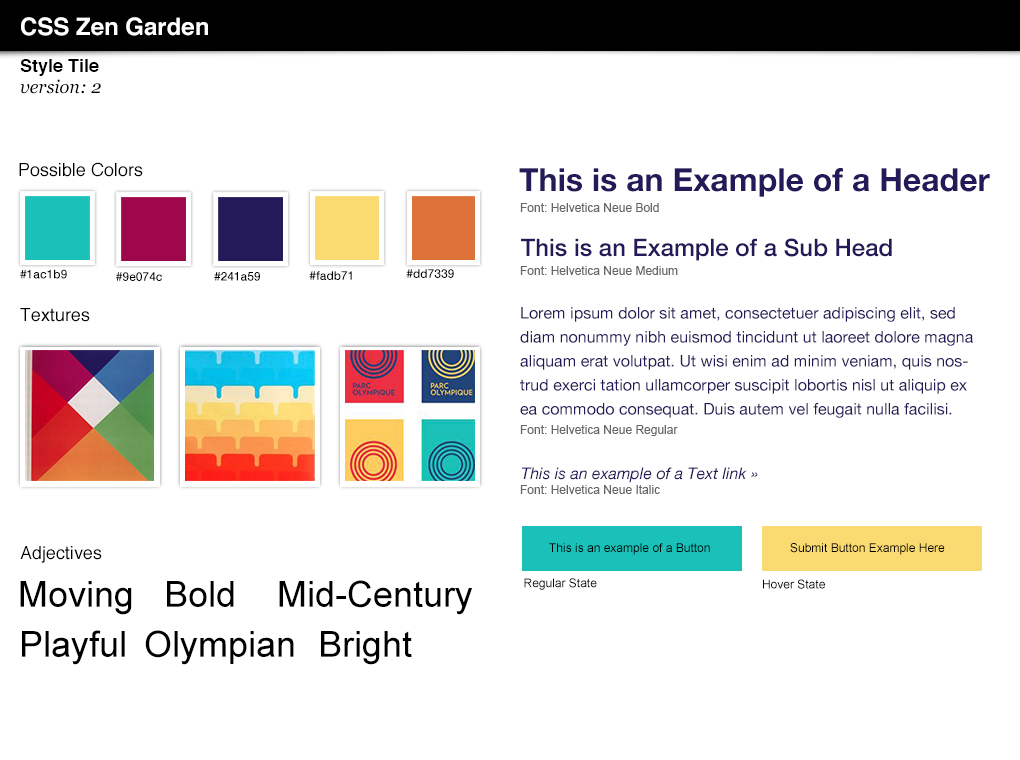
<style>
.page{position:relative;width:1020px;height:760px;background:#ffffff}
.page>*{position:absolute;margin:0}
.t1{font:24px "Helvetica-Bold";color:#ffffff}
.t2{font:18px "Helvetica-Bold";color:#000000}
.t3{font:18px "Georgia-Italic";color:#000000}
.t4{font:18px "Helvetica";color:#000000}
.t5{font:32px "HelveticaNeue-Bold";color:#241a59}
.t6{font:12px "ArialMT";color:#666666}
.t7{font:24px "HelveticaNeue-Medium";color:#241a59}
.t8{font:12px "HelveticaNeue-Medium";color:#000000}
.t9{font:16px/24px "HelveticaNeue";color:#241a59}
.t10{font:16px "HelveticaNeue-Italic";color:#241a59}
.t11{font:12px "ArialMT";color:#000000}
.t12{font:36px "ArialMT";color:#000000}
</style>
<div class="page">
<p class="t1" style="left:21px;top:17px;width:187px;height:19px">CSS Zen Garden</p>
<p class="t2" style="left:20px;top:59px;width:79px;height:17px">Style Tile</p>
<p class="t3" style="left:20px;top:79px;width:81px;height:15px">version: 2</p>
<p class="t4" style="left:19px;top:162px;width:124px;height:15px">Possible Colors</p>
<p class="t5" style="left:519px;top:168px;width:471px;height:29px">This is an Example of a Header</p>
<p class="t6" style="left:520px;top:203px;width:139px;height:9px">Font: Helvetica Neue Bold</p>
<p class="t7" style="left:521px;top:238px;width:371px;height:23px">This is an Example of a Sub Head</p>
<p class="t8" style="left:20px;top:269px;width:47px;height:10px">#1ac1b9</p>
<p class="t8" style="left:406px;top:269px;width:48px;height:9px">#dd7339</p>
<p class="t6" style="left:520px;top:266px;width:158px;height:9px">Font: Helvetica Neue Medium</p>
<p class="t8" style="left:116px;top:272px;width:46px;height:9px">#9e074c</p>
<p class="t8" style="left:214px;top:272px;width:46px;height:9px">#241a59</p>
<p class="t8" style="left:309px;top:271px;width:43px;height:9px">#fadb71</p>
<p class="t4" style="left:20px;top:308px;width:70px;height:14px">Textures</p>
<p class="t9" style="left:520px;top:307px;width:453px;height:111px">Lorem ipsum dolor sit amet, consectetuer adipiscing elit, sed diam nonummy nibh euismod tincidunt ut laoreet dolore magna aliquam erat volutpat. Ut wisi enim ad minim veniam, quis nostrud exerci tation ullamcorper suscipit lobortis nisl ut aliquip ex ea commodo consequat. Duis autem vel feugait nulla facilisi.</p>
<p class="t6" style="left:520px;top:425px;width:158px;height:11px">Font: Helvetica Neue Regular</p>
<p class="t10" style="left:522px;top:467px;width:236px;height:16px">This is an example of a Text link »</p>
<p class="t6" style="left:520px;top:485px;width:140px;height:9px">Font: Helvetica Neue Italic</p>
<p class="t11" style="left:549px;top:543px;width:161px;height:12px">This is an example of a Button</p>
<p class="t11" style="left:790px;top:543px;width:155px;height:12px">Submit Button Example Here</p>
<p class="t4" style="left:20px;top:546px;width:82px;height:17px">Adjectives</p>
<p class="t12" style="left:20px;top:581px;width:112px;height:34px">Moving</p>
<p class="t12" style="left:167px;top:581px;width:67px;height:26px">Bold</p>
<p class="t12" style="left:279px;top:580px;width:194px;height:35px">Mid-Century</p>
<p class="t11" style="left:524px;top:578px;width:73px;height:12px">Regular State</p>
<p class="t11" style="left:763px;top:579px;width:62px;height:10px">Hover State</p>
<p class="t12" style="left:22px;top:630px;width:103px;height:35px">Playful</p>
<p class="t12" style="left:145px;top:630px;width:149px;height:35px">Olympian</p>
<p class="t12" style="left:321px;top:631px;width:91px;height:34px">Bright</p>
</div>
